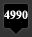
<style>
.page{position:relative;width:32px;height:37px;background:#000000}
.page>*{position:absolute;margin:0}
.t1{font:12px "TimesNewRomanPS-BoldMT";color:#ffffff}
</style>
<div class="page">
<p class="t1" style="left:4px;top:10px;width:24px;height:9px">4990</p>
</div>
